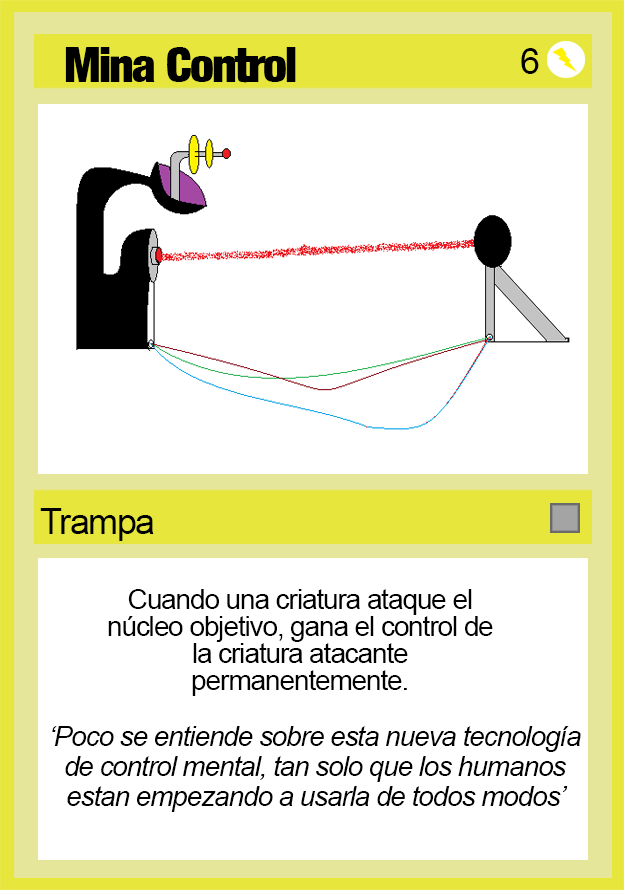
<style>
.page{position:relative;width:624px;height:890px;background:#ffffff}
.page>*{position:absolute;margin:0}
.t1{font:48px "Harvest";letter-spacing:-0.04em;color:#000000}
.t2{font:36px "ArialMT";letter-spacing:-0.04em;color:#000000}
.t3{font:28px/27px "ArialMT";letter-spacing:-0.04em;color:#000000}
.t4{font:28px/30px "Arial-ItalicMT";letter-spacing:-0.04em;color:#000000}
.t5{font:28px/54px "Arial-ItalicMT";letter-spacing:-0.04em;color:#000000}
</style>
<div class="page">
<p class="t1" style="left:65px;top:47px;width:231px;height:36px">Mina Control</p>
<p class="t2" style="left:521px;top:48px;width:18px;height:26px">6</p>
<p class="t2" style="left:40px;top:508px;width:114px;height:33px">Trampa</p>
<p class="t3" style="left:108px;top:589px;width:385px;height:107px;text-align:center">Cuando una criatura ataque el núcleo objetivo, gana el control de la criatura atacante permanentemente.</p>
<p class="t4" style="left:52px;top:726px;width:529px;height:86px;text-align:center"><span class="t5">‘</span>Poco se entiende sobre esta nueva tecnología de control mental, tan solo que los humanos estan empezando a usarla de todos modos’</p>
</div>
